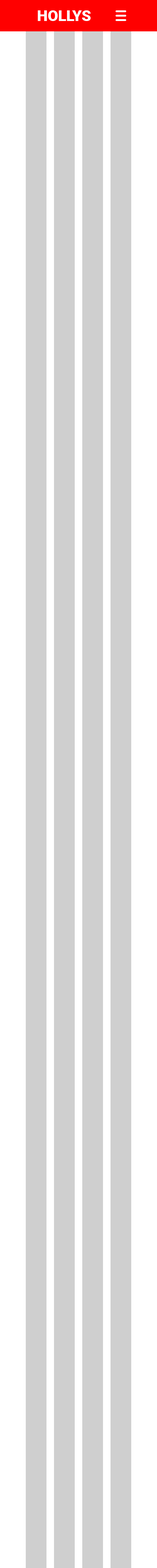
<style>
.page{position:relative;width:157px;height:1568px;background:#ffffff}
.page>*{position:absolute;margin:0}
.t1{font:15.1px "Roboto-Black";color:#ffffff}
</style>
<div class="page">
<p class="t1" style="left:38px;top:10px;width:53px;height:11px">HOLLYS</p>
</div>
